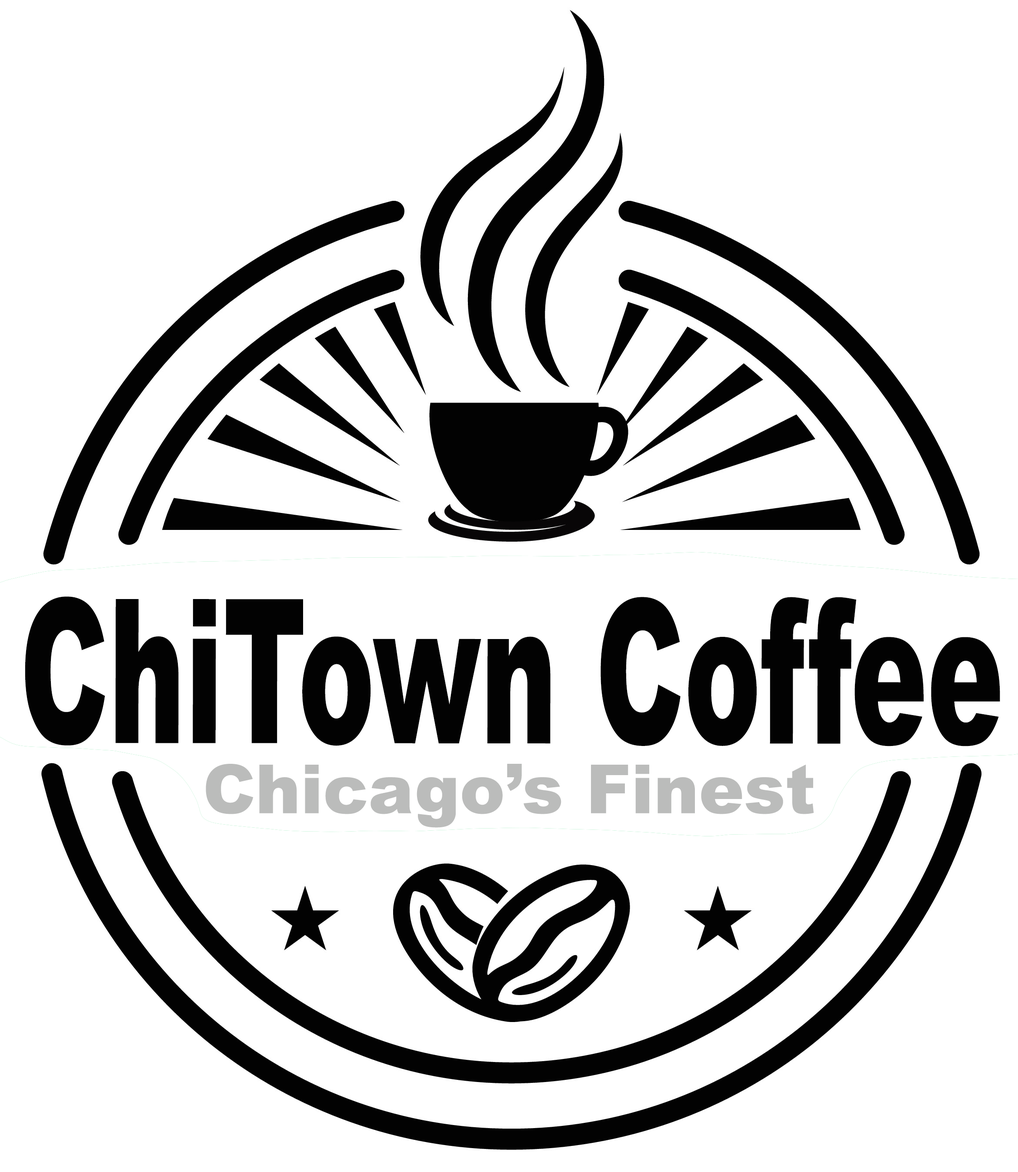
<style>
.page{position:relative;width:1018px;height:1172px;background:#ffffff}
.page>*{position:absolute;margin:0}
.t1{font:201.1px "Arial-Black";color:#020202;scale:0.57 1}
.t2{font:67.7px "Arial-Black";color:#bbbcbb}
</style>
<div class="page">
<p class="t1" style="left:25px;top:596px;width:975px;height:150px">ChiTown Coffee</p>
<p class="t2" style="left:206px;top:764px;width:608px;height:64px">Chicago’s Finest</p>
</div>
